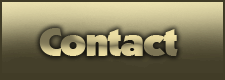
<style>
.page{position:relative;width:225px;height:80px}
.page>*{position:absolute;margin:0}
.t1{font:40.5px "KabelITCbyBT-Ultra";letter-spacing:-0.04em;scale:1.07 1}
</style>
<div class="page">
<p class="t1" style="left:39px;top:28px;width:139px;height:28px">Contact</p>
</div>
